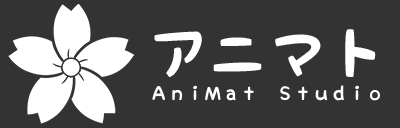
<style>
.page{position:relative;width:400px;height:128px;background:#333333}
.page>*{position:absolute;margin:0}
.t1{font:60px "KFhimaji";color:#ffffff}
.t2{font:18px "KFhimaji";color:#ffffff}
</style>
<div class="page">
<p class="t1" style="left:154px;top:29px;width:222px;height:49px">アニマト</p>
<p class="t2" style="left:152px;top:85px;width:228px;height:16px">ＡｎｉＭａｔ　Ｓｔｕｄｉｏ</p>
</div>
